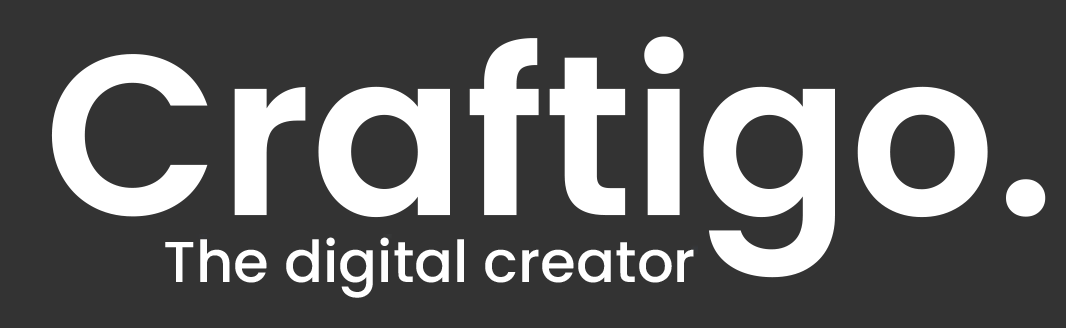
<style>
.page{position:relative;width:1066px;height:328px;background:#333333}
.page>*{position:absolute;margin:0}
.t1{font:227.6px "Poppins-SemiBold";color:#ffffff}
.t2{font:57.7px "Poppins-Medium";color:#ffffff}
</style>
<div class="page">
<p class="t1" style="left:51px;top:36px;width:995px;height:242px">Craftigo.</p>
<p class="t2" style="left:165px;top:237px;width:529px;height:61px">The digital creator</p>
</div>
